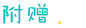
<style>
.page{position:relative;width:86px;height:28px;background:#ffffff}
.page>*{position:absolute;margin:0}
.t1{font:22px "BauhausITC";letter-spacing:0.1em;color:#02c1bf}
</style>
<div class="page">
<p class="t1" style="left:2px;top:3px;width:46px;height:21px">附赠</p>
</div>
